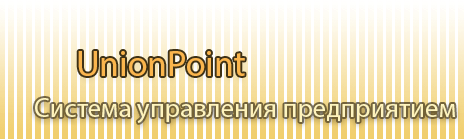
<style>
.page{position:relative;width:464px;height:139px;background:#ffffff}
.page>*{position:absolute;margin:0}
.t1{font:36px "MyriadPro-Regular";color:#fab54d}
.t2{font:27px "MyriadPro-Regular";color:#fef4be}
</style>
<div class="page">
<p class="t1" style="left:78px;top:51px;width:167px;height:25px">UnionPoint</p>
<p class="t2" style="left:35px;top:98px;width:420px;height:25px">Система управления предприятием</p>
</div>
